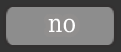
<style>
.page{position:relative;width:121px;height:52px;background:#8d8d8d}
.page>*{position:absolute;margin:0}
.t1{font:25px "DejaVuSerifCondensed";color:#ffffff}
</style>
<div class="page">
<p class="t1" style="left:48px;top:18px;width:27px;height:15px">no</p>
</div>
